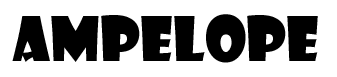
<style>
.page{position:relative;width:337px;height:77px;background:#ffffff}
.page>*{position:absolute;margin:0}
.t1{font:60px "ShowcardGothic-Reg";color:#000000}
</style>
<div class="page">
<p class="t1" style="left:12px;top:14px;width:306px;height:49px">AMPELOPE</p>
</div>
